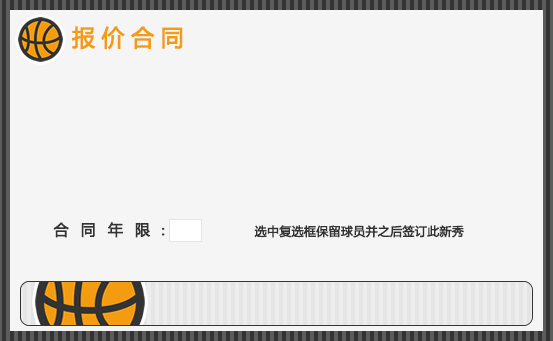
<style>
.page{position:relative;width:553px;height:341px;background:#f5f5f5}
.page>*{position:absolute;margin:0}
.t1{font:23px "MicrosoftYaHei";letter-spacing:0.26em;color:#f39c12;font-weight:bold}
.t2{font:15px "MicrosoftYaHei";letter-spacing:0.78em;color:#333333;font-weight:bold}
.t3{font:12px "MicrosoftYaHei";color:#333333;font-weight:bold}
</style>
<div class="page">
<p class="t1" style="left:71px;top:26px;width:112px;height:24px">报价合同</p>
<p class="t2" style="left:53px;top:222px;width:97px;height:16px">合同年限</p>
<p class="t3" style="left:254px;top:225px;width:210px;height:13px">选中复选框保留球员并之后签订此新秀</p>
</div>
